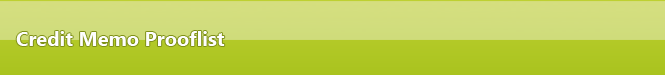
<style>
.page{position:relative;width:665px;height:75px}
.page>*{position:absolute;margin:0}
.t1{font:20px "SegoeUI-Bold";color:#fefefe}
</style>
<div class="page">
<p class="t1" style="left:16px;top:31px;width:209px;height:15px">Credit Memo Prooflist</p>
</div>
